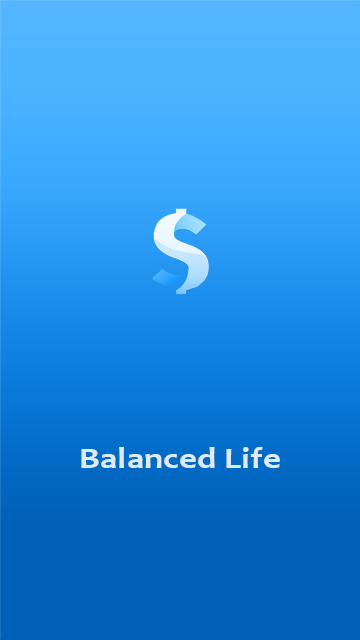
<style>
.page{position:relative;width:360px;height:640px}
.page>*{position:absolute;margin:0}
.t1{font:29.7px "Candara-Bold";color:#ddebf6;scale:1.19 1}
</style>
<div class="page">
<p class="t1" style="left:81px;top:447px;width:199px;height:21px">Balanced Life</p>
</div>
